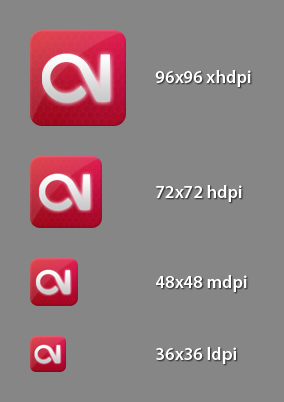
<style>
.page{position:relative;width:284px;height:402px;background:#868686}
.page>*{position:absolute;margin:0}
.t1{font:18px "MyriadPro-Semibold";color:#ffffff}
</style>
<div class="page">
<p class="t1" style="left:155px;top:70px;width:96px;height:17px">96x96 xhdpi</p>
<p class="t1" style="left:156px;top:185px;width:86px;height:17px">72x72 hdpi</p>
<p class="t1" style="left:156px;top:275px;width:91px;height:17px">48x48 mdpi</p>
<p class="t1" style="left:156px;top:347px;width:80px;height:17px">36x36 ldpi</p>
</div>
